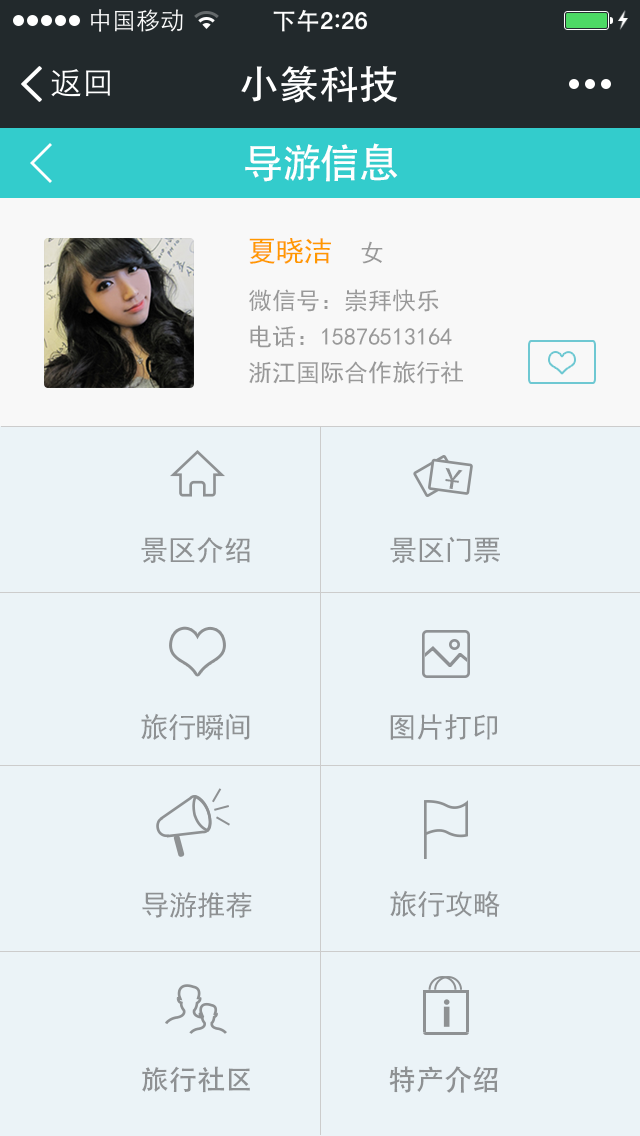
<style>
.page{position:relative;width:640px;height:1136px;background:#ebf3f7}
.page>*{position:absolute;margin:0}
.t1{font:40px "AdobeHeitiStd-Regular";color:#ffffff}
.t2{font:24px/36px "SimHei";color:#999999}
.t3{font:28px/48px "SimHei";color:#ff9900}
.t4{font:24px/48px "SimHei";color:#999999}
.t5{font:27px "AdobeHeitiStd-Regular";color:#8e9193}
.t6{font:28px "SimHei";color:#8e9193}
.t7{font:28px "AdobeHeitiStd-Regular";color:#8e9193}
</style>
<div class="page">
<p class="t1" style="left:245px;top:143px;width:153px;height:39px">导游信息</p>
<p class="t2" style="left:249px;top:238px;width:214px;height:146px;text-align:right"><span class="t3">夏晓洁  </span><span class="t4">女<br>微信号：崇拜快乐<br></span>电话：15876513164<br>浙江国际合作旅行社</p>
<p class="t5" style="left:445px;top:467px;width:18px;height:22px;rotate:8deg">￥</p>
<p class="t6" style="left:141px;top:537px;width:109px;height:26px">景区介绍</p>
<p class="t6" style="left:390px;top:536px;width:110px;height:27px">景区门票</p>
<p class="t6" style="left:141px;top:713px;width:109px;height:28px">旅行瞬间</p>
<p class="t6" style="left:390px;top:714px;width:107px;height:26px">图片打印</p>
<p class="t6" style="left:142px;top:892px;width:110px;height:26px">导游推荐</p>
<p class="t6" style="left:390px;top:890px;width:110px;height:27px">旅行攻略</p>
<p class="t7" style="left:142px;top:1066px;width:108px;height:27px">旅行社区</p>
<p class="t7" style="left:389px;top:1066px;width:109px;height:27px">特产介绍</p>
</div>
